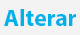
<style>
.page{position:relative;width:80px;height:35px;background:#f4f3f3}
.page>*{position:absolute;margin:0}
.t1{font:23.5px "MyriadPro-Bold";color:#00b2e8}
</style>
<div class="page">
<p class="t1" style="left:4px;top:9px;width:72px;height:17px">Alterar</p>
</div>
